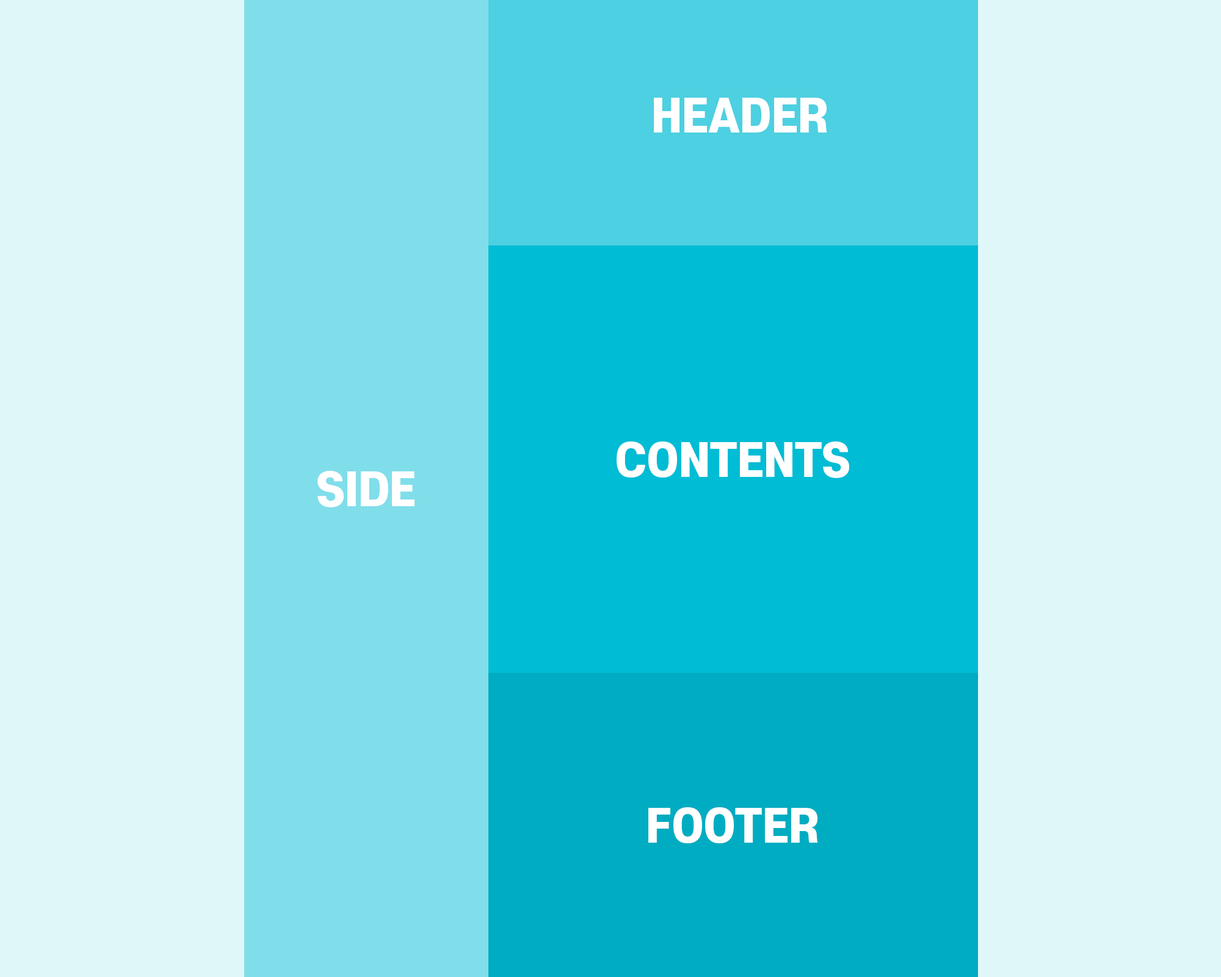
<style>
.page{position:relative;width:1221px;height:977px;background:#e0f7fa}
.page>*{position:absolute;margin:0}
.t1{font:44px "S-CoreDream-8Heavy";color:#ffffff}
</style>
<div class="page">
<p class="t1" style="left:654px;top:98px;width:173px;height:34px">HEADER</p>
<p class="t1" style="left:617px;top:441px;width:232px;height:37px">CONTENTS</p>
<p class="t1" style="left:317px;top:471px;width:97px;height:36px">SIDE</p>
<p class="t1" style="left:648px;top:807px;width:170px;height:36px">FOOTER</p>
</div>
